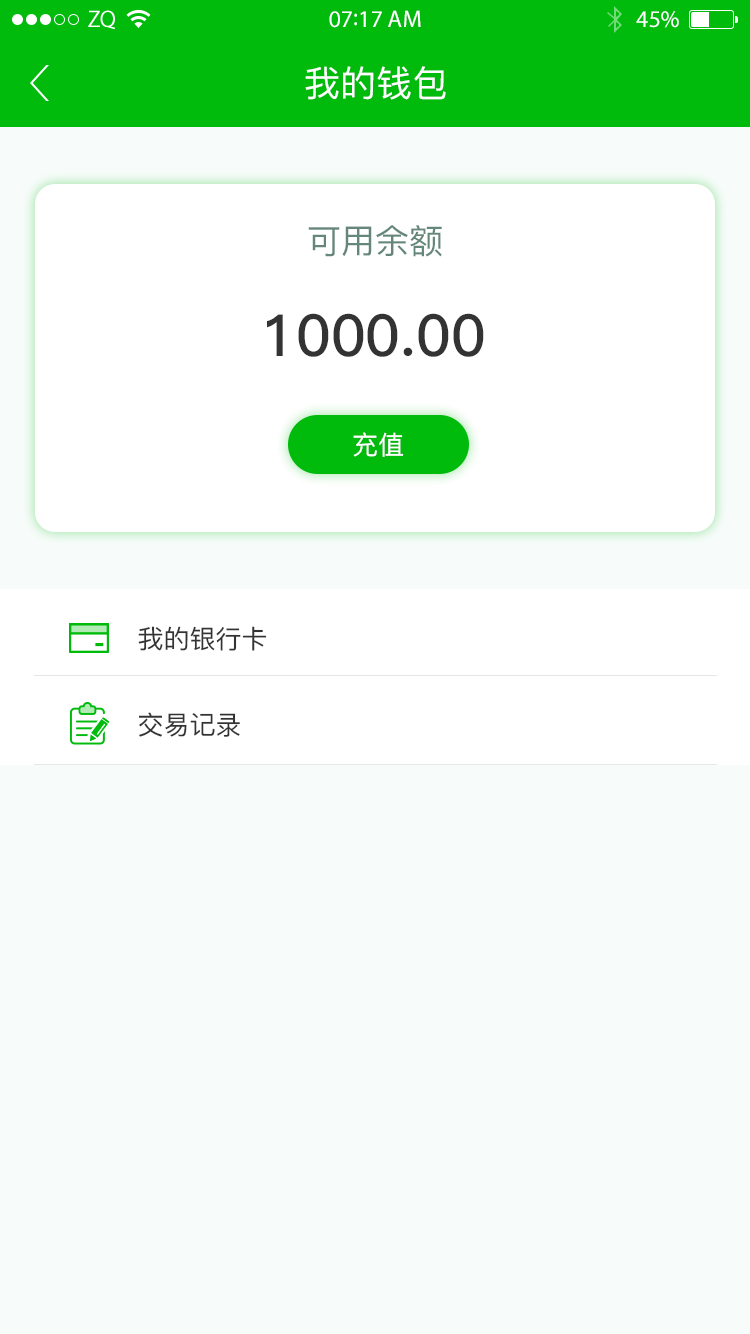
<style>
.page{position:relative;width:750px;height:1334px;background:#f7fcfa}
.page>*{position:absolute;margin:0}
.t1{font:24px "MyriadPro-Regular";color:#ffffff}
.t2{font:36px "PingFang-SC-Medium";color:#ffffff}
.t3{font:34px "PingFang-SC-Medium";color:#65877a}
.t4{font:58px "PingFang-SC-Bold";color:#333333}
.t5{font:26px "PingFang-SC-Medium";color:#ffffff}
.t6{font:26px "PingFang-SC-Medium";color:#333333}
</style>
<div class="page">
<p class="t1" style="left:329px;top:10px;width:92px;height:18px">07:17 AM</p>
<p class="t1" style="left:636px;top:11px;width:43px;height:17px">45%</p>
<p class="t2" style="left:305px;top:66px;width:141px;height:34px">我的钱包</p>
<p class="t3" style="left:308px;top:225px;width:134px;height:32px">可用余额</p>
<p class="t4" style="left:267px;top:313px;width:217px;height:44px">1000.00</p>
<p class="t5" style="left:353px;top:432px;width:51px;height:25px">充值</p>
<p class="t6" style="left:138px;top:626px;width:129px;height:25px">我的银行卡</p>
<p class="t6" style="left:138px;top:712px;width:102px;height:25px">交易记录</p>
</div>
